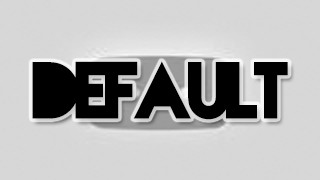
<style>
.page{position:relative;width:320px;height:180px;background:#d7d7d7}
.page>*{position:absolute;margin:0}
.t1{font:100px "NovaSOLID-SOLID";color:#000000}
</style>
<div class="page">
<p class="t1" style="left:32px;top:61px;width:256px;height:59px">DEFAULT</p>
</div>
